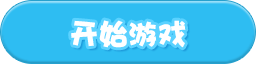
<style>
.page{position:relative;width:256px;height:64px;background:#2ebdf2}
.page>*{position:absolute;margin:0}
.t1{font:29.3px "DFPHaiBaoW12";color:#ffffff}
</style>
<div class="page">
<p class="t1" style="left:71px;top:20px;width:115px;height:28px">开始游戏</p>
</div>
